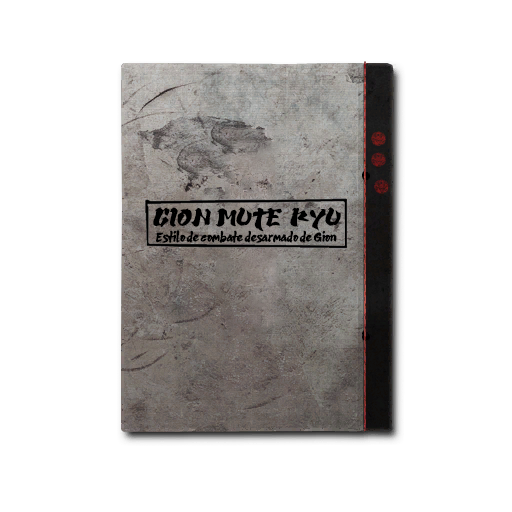
<style>
.page{position:relative;width:512px;height:512px;background:#ffffff}
.page>*{position:absolute;margin:0}
.t1{font:19px "NinjaKageDemo-Regular";letter-spacing:-0.02em;color:#000000;text-transform:uppercase;font-weight:bold}
.t2{font:10px "Amanojaku";color:#000000;font-weight:bold}
</style>
<div class="page">
<p class="t1" style="left:153px;top:207px;width:188px;height:25px">Gion Mute  ryu</p>
<p class="t2" style="left:156px;top:230px;width:181px;height:13px">Estilo de combate desarmado de Gion</p>
</div>
